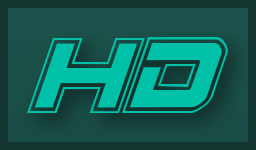
<style>
.page{position:relative;width:256px;height:150px}
.page>*{position:absolute;margin:0}
.t1{font:150px "SpaceRangerAcademyItalic";color:#00c0a7}
</style>
<div class="page">
<p class="t1" style="left:27px;top:37px;width:201px;height:76px">HD</p>
</div>
